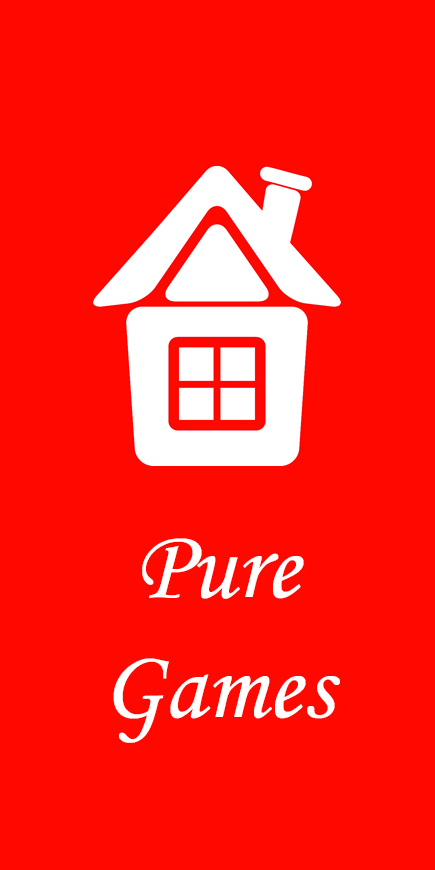
<style>
.page{position:relative;width:435px;height:870px;background:#ff0800}
.page>*{position:absolute;margin:0}
.t1{font:100px "MonotypeCorsiva";color:#ffffff}
</style>
<div class="page">
<p class="t1" style="left:113px;top:538px;width:227px;height:205px;text-align:center">Pure Games</p>
</div>
